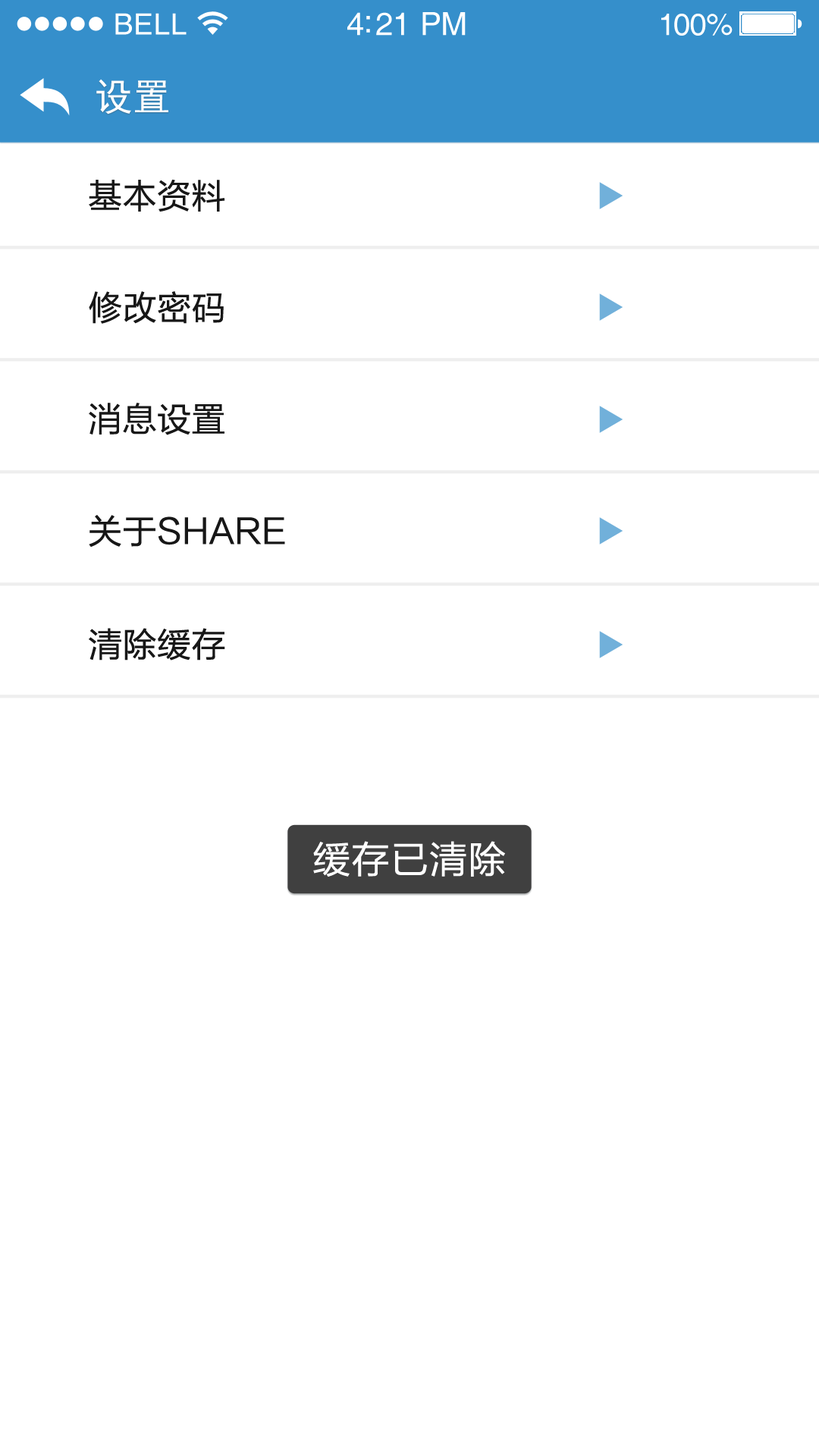
<style>
.page{position:relative;width:819px;height:1456px;background:#ffffff}
.page>*{position:absolute;margin:0}
.t1{font:29.3px "Helvetica";letter-spacing:0.02em;color:#ffffff}
.t2{font:31.8px "Helvetica";letter-spacing:-0.02em;color:#ffffff}
.t3{font:30.6px "Helvetica";letter-spacing:-0.02em;color:#ffffff}
.t4{font:37.9px "SimHei";color:#ffffff}
.t5{font:34.1px "FZLTHJW--GB1-0";letter-spacing:0.01em;color:#171717}
.t6{font:37.9px "FZLTHJW--GB1-0";letter-spacing:0.025em;color:#ffffff}
</style>
<div class="page">
<p class="t1" style="left:115px;top:13px;width:72px;height:22px">BELL</p>
<p class="t2" style="left:347px;top:12px;width:119px;height:24px">4:21 PM</p>
<p class="t3" style="left:661px;top:14px;width:72px;height:22px">100%</p>
<p class="t4" style="left:96px;top:79px;width:72px;height:36px">设置</p>
<p class="t5" style="left:89px;top:179px;width:136px;height:33px">基本资料</p>
<p class="t5" style="left:89px;top:291px;width:135px;height:33px">修改密码</p>
<p class="t5" style="left:89px;top:403px;width:135px;height:32px">消息设置</p>
<p class="t5" style="left:89px;top:515px;width:196px;height:33px">关于SHARE</p>
<p class="t5" style="left:89px;top:628px;width:136px;height:32px">清除缓存</p>
<p class="t6" style="left:313px;top:841px;width:192px;height:36px">缓存已清除</p>
</div>
